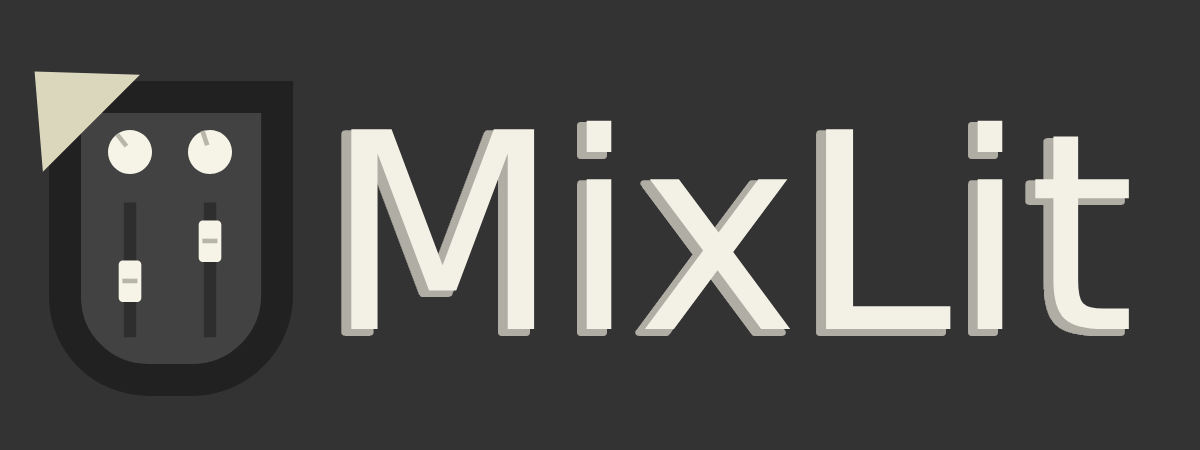
<style>
.page{position:relative;width:1200px;height:450px;background:#333333}
.page>*{position:absolute;margin:0}
.t1{font:274px "BitstreamVeraSans-Roman";color:#f3f1e5}
</style>
<div class="page">
<p class="t1" style="left:351px;top:120px;width:778px;height:209px">MixLit</p>
</div>
